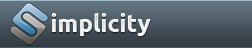
<style>
.page{position:relative;width:252px;height:48px}
.page>*{position:absolute;margin:0}
.t1{font:24.2px "Ubuntu-Bold";color:#ffffff}
</style>
<div class="page">
<p class="t1" style="left:51px;top:13px;width:100px;height:23px">implicity</p>
</div>
